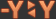
<style>
.page{position:relative;width:56px;height:19px;background:#333333}
.page>*{position:absolute;margin:0}
.t1{font:24px "Ubuntu-Bold";color:#ec915d}
.t2{font:24px "Ubuntu-Bold";color:#ef935f}
</style>
<div class="page">
<p class="t1" style="left:1px;top:1px;width:23px;height:17px">-Y</p>
<p class="t2" style="left:39px;top:1px;width:16px;height:17px">Y</p>
</div>
